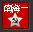
<style>
.page{position:relative;width:33px;height:32px;background:#c50000}
.page>*{position:absolute;margin:0}
.t1{font:10.4px "SimSun";letter-spacing:-0.25em;color:#ffffff}
</style>
<div class="page">
<p class="t1" style="left:4px;top:4px;width:24px;height:9px">南海一</p>
</div>
